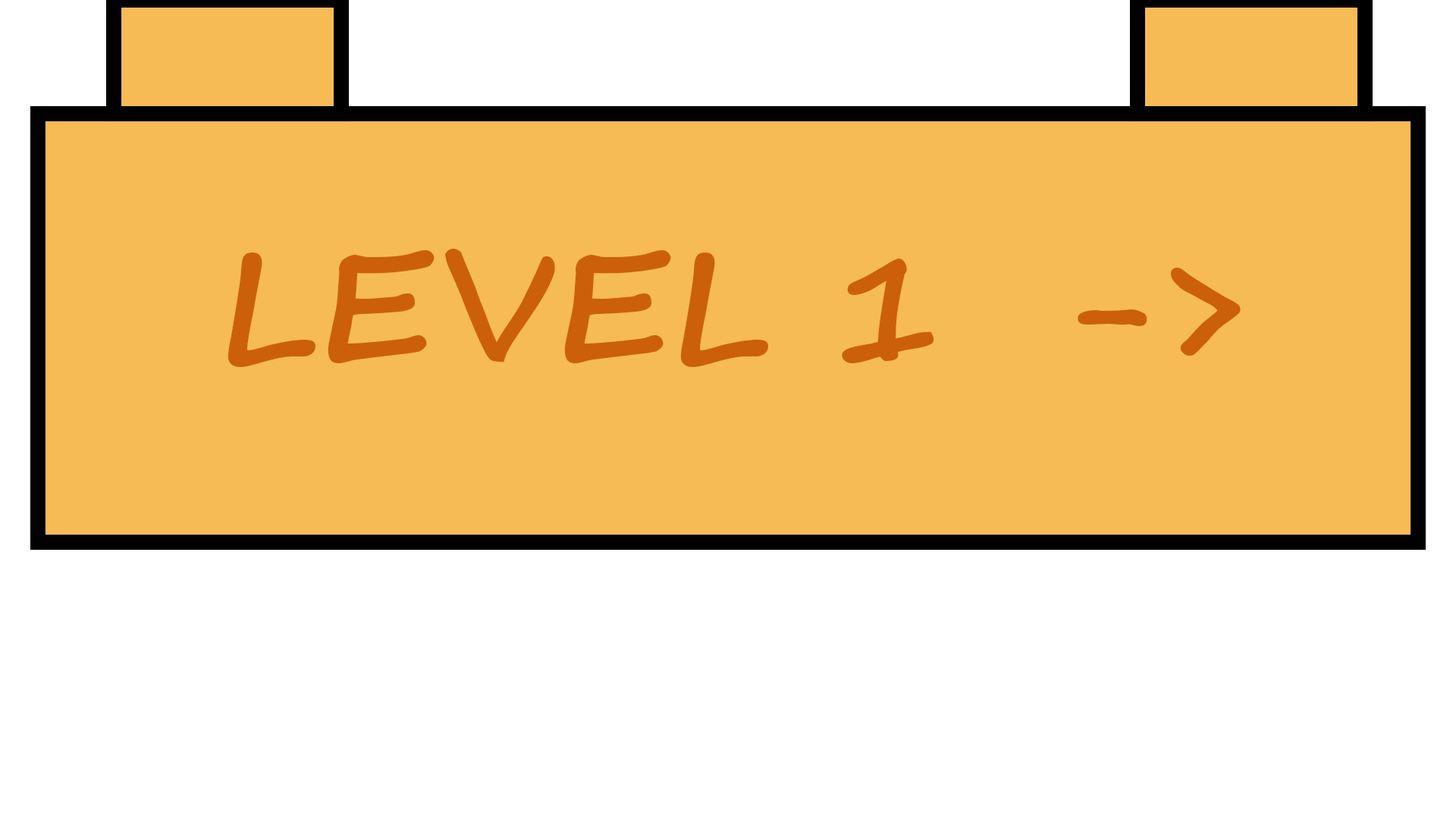
<style>
.page{position:relative;width:1456px;height:819px;background:#f6bb55}
.page>*{position:absolute;margin:0}
.t1{font:151.7px "SegoeScript-Bold";color:#cc600a;text-transform:uppercase}
</style>
<div class="page">
<p class="t1" style="left:227px;top:249px;width:1014px;height:118px">Level 1  -&gt;</p>
</div>
